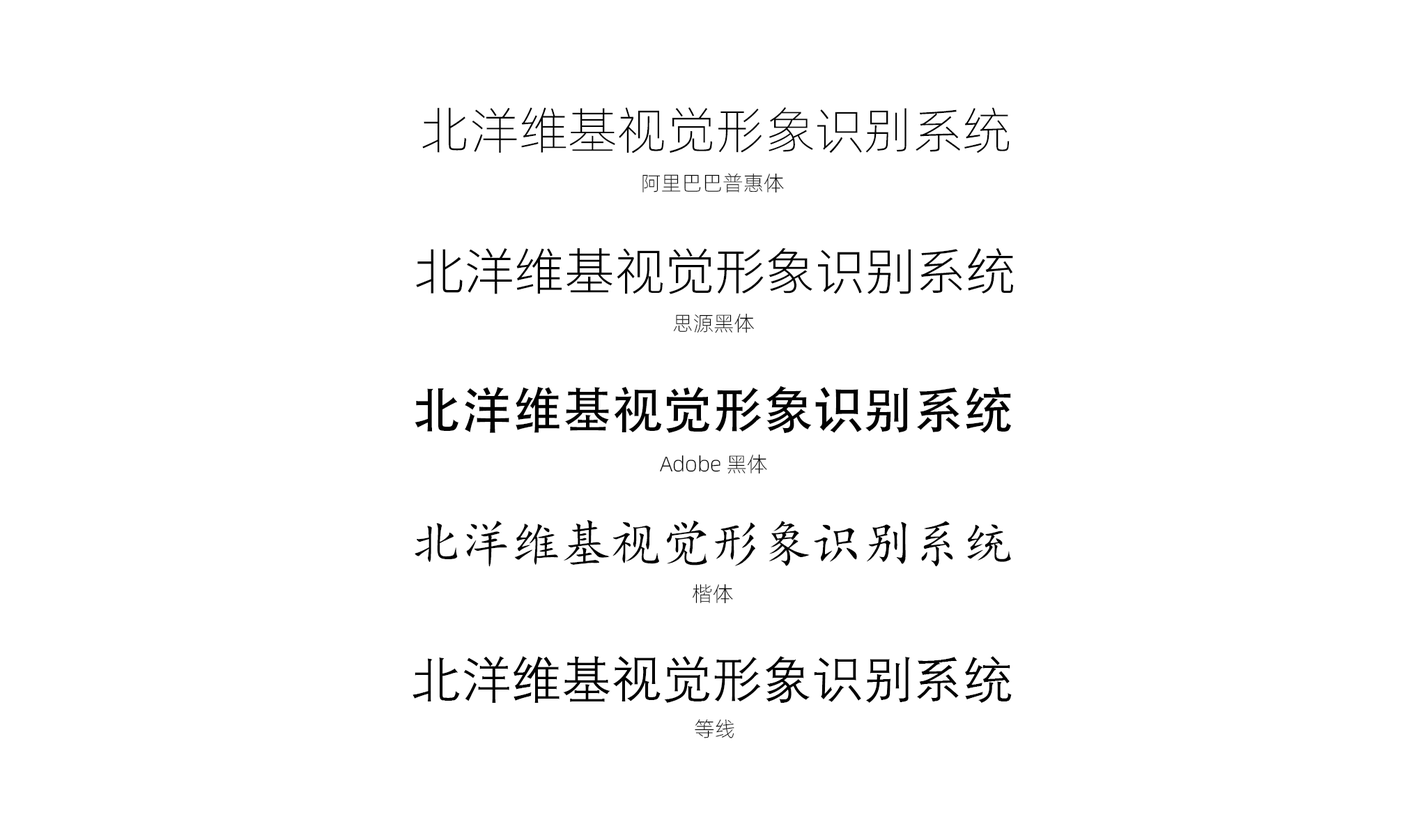
<style>
.page{position:relative;width:1427px;height:836px;background:#ffffff}
.page>*{position:absolute;margin:0}
.t1{font:50.2px "Alibaba-PuHuiTi-L";color:#000000}
.t2{font:20.9px "Alibaba-PuHuiTi-L";color:#000000}
.t3{font:50.2px "SourceHanSansCN-Light";color:#000000}
.t4{font:50.2px "AdobeHeitiStd-Regular";color:#000000}
.t5{font:50.2px "KaiTi";color:#000000}
.t6{font:50.2px "DengXian";color:#000000}
</style>
<div class="page">
<p class="t1" style="left:422px;top:107px;width:588px;height:46px">北洋维基视觉形象识别系统</p>
<p class="t2" style="left:643px;top:173px;width:141px;height:20px">阿里巴巴普惠体</p>
<p class="t3" style="left:416px;top:247px;width:597px;height:47px">北洋维基视觉形象识别系统</p>
<p class="t2" style="left:673px;top:313px;width:81px;height:20px">思源黑体</p>
<p class="t4" style="left:415px;top:385px;width:596px;height:48px">北洋维基视觉形象识别系统</p>
<p class="t2" style="left:660px;top:454px;width:107px;height:20px">Adobe 黑体</p>
<p class="t5" style="left:415px;top:520px;width:596px;height:47px">北洋维基视觉形象识别系统</p>
<p class="t2" style="left:693px;top:583px;width:40px;height:20px">楷体</p>
<p class="t6" style="left:413px;top:656px;width:599px;height:46px">北洋维基视觉形象识别系统</p>
<p class="t2" style="left:695px;top:718px;width:39px;height:20px">等线</p>
</div>
